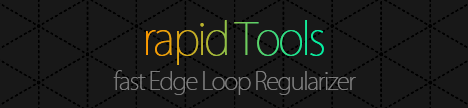
<style>
.page{position:relative;width:468px;height:108px;background:#181818}
.page>*{position:absolute;margin:0}
.t1{font:44.1px "KozGoPr6N-ExtraLight";letter-spacing:-0.06em}
.t2{font:24.1px "KozGoPr6N-ExtraLight";letter-spacing:-0.06em;color:#7f7f7f}
</style>
<div class="page">
<p class="t1" style="left:146px;top:20px;width:178px;height:45px">rapid Tools</p>
<p class="t2" style="left:113px;top:70px;width:243px;height:25px">fast Edge Loop Regularizer</p>
</div>
